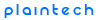
<style>
.page{position:relative;width:100px;height:20px;background:#ffffff}
.page>*{position:absolute;margin:0}
.t1{font:18px "REZ";letter-spacing:0.2em;color:#0072ff}
</style>
<div class="page">
<p class="t1" style="left:4px;top:4px;width:90px;height:14px">PlainTech</p>
</div>
